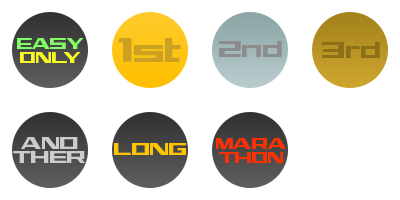
<style>
.page{position:relative;width:400px;height:200px;background:#ffffff}
.page>*{position:absolute;margin:0}
.t1{font:16px/14px "2051PLASTIC-ALP50";color:#80ff66}
.t2{font:16px/14px "2051PLASTIC-ALP50";color:#f9fb20}
.t3{font:36px "2051PLASTIC-ALP50";color:#cca121}
.t4{font:24px "2051PLASTIC-ALP50";color:#8c8c8c}
.t5{font:24px "2051PLASTIC-ALP50";color:#8c6f16}
.t6{font:18px/14px "2051PLASTIC-ALP50";color:#cccccc}
.t7{font:18px "2051PLASTIC-ALP50";color:#ffc600}
.t8{font:16px/14px "2051PLASTIC-ALP50";color:#ff3000}
</style>
<div class="page">
<p class="t1" style="left:17px;top:38px;width:67px;height:25px;text-align:center">EASY<br><span class="t2">ONLY</span></p>
<p class="t3" style="left:118px;top:38px;width:63px;height:24px">1st</p>
<p class="t4" style="left:219px;top:41px;width:63px;height:16px">2nd</p>
<p class="t5" style="left:322px;top:42px;width:58px;height:16px">3rd</p>
<p class="t6" style="left:13px;top:137px;width:72px;height:26px;text-align:center">ANO<br>THER</p>
<p class="t7" style="left:114px;top:143px;width:72px;height:12px">LONG</p>
<p class="t8" style="left:216px;top:138px;width:70px;height:25px;text-align:center">MARA<br>THON</p>
</div>
